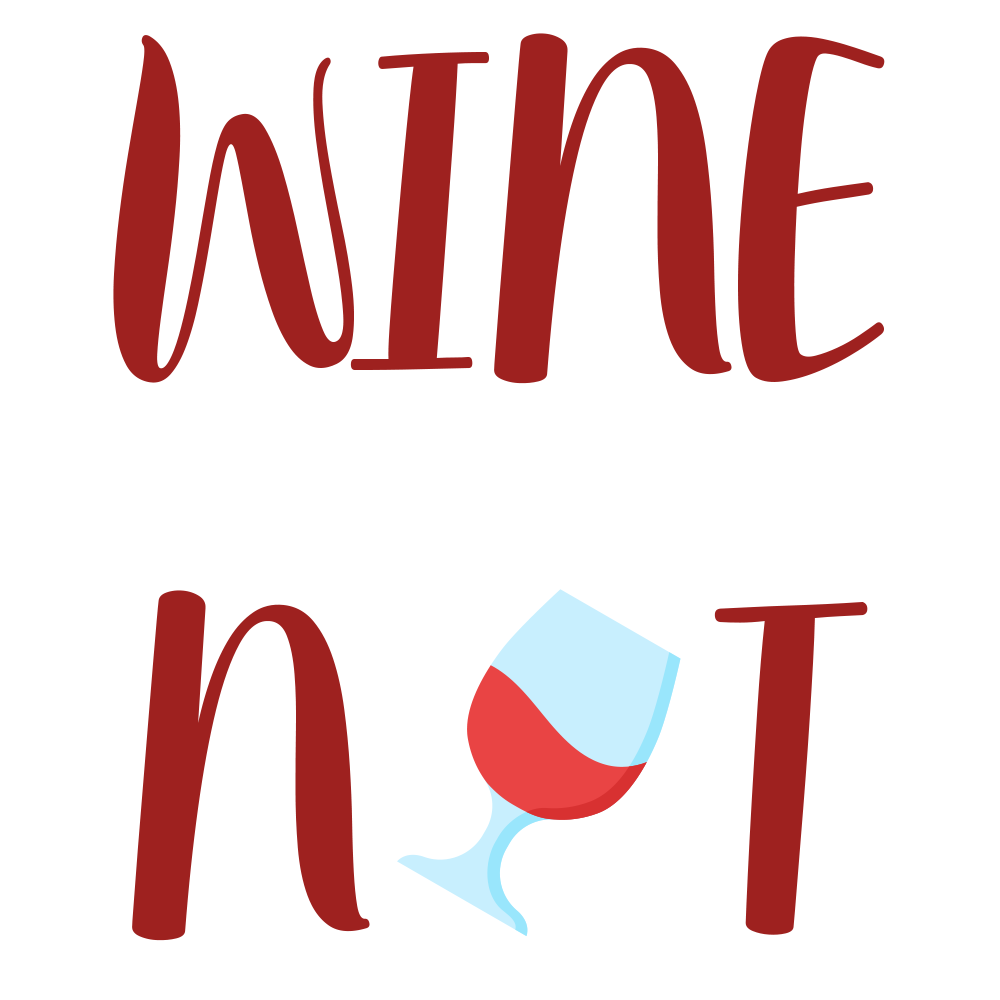
<style>
.page{position:relative;width:1000px;height:1000px;background:#ffffff}
.page>*{position:absolute;margin:0}
.t1{font:584.5px "MoonbrightDemo";letter-spacing:-0.02em;color:#9e211f;scale:0.79 1}
</style>
<div class="page">
<p class="t1" style="left:113px;top:33px;width:772px;height:908px;text-align:center">WINE<br>N   T</p>
</div>
